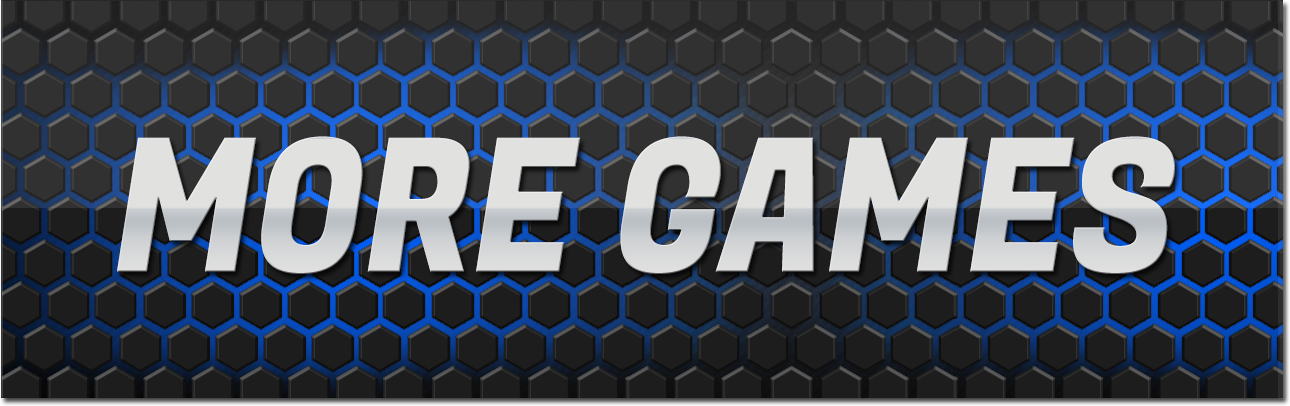
<style>
.page{position:relative;width:1290px;height:406px;background:#313131}
.page>*{position:absolute;margin:0}
.t1{font:185.2px "FugazOne-Regular";color:#dfdfdf;scale:0.89 1}
</style>
<div class="page">
<p class="t1" style="left:117px;top:136px;width:1058px;height:138px">MORE GAMES</p>
</div>
